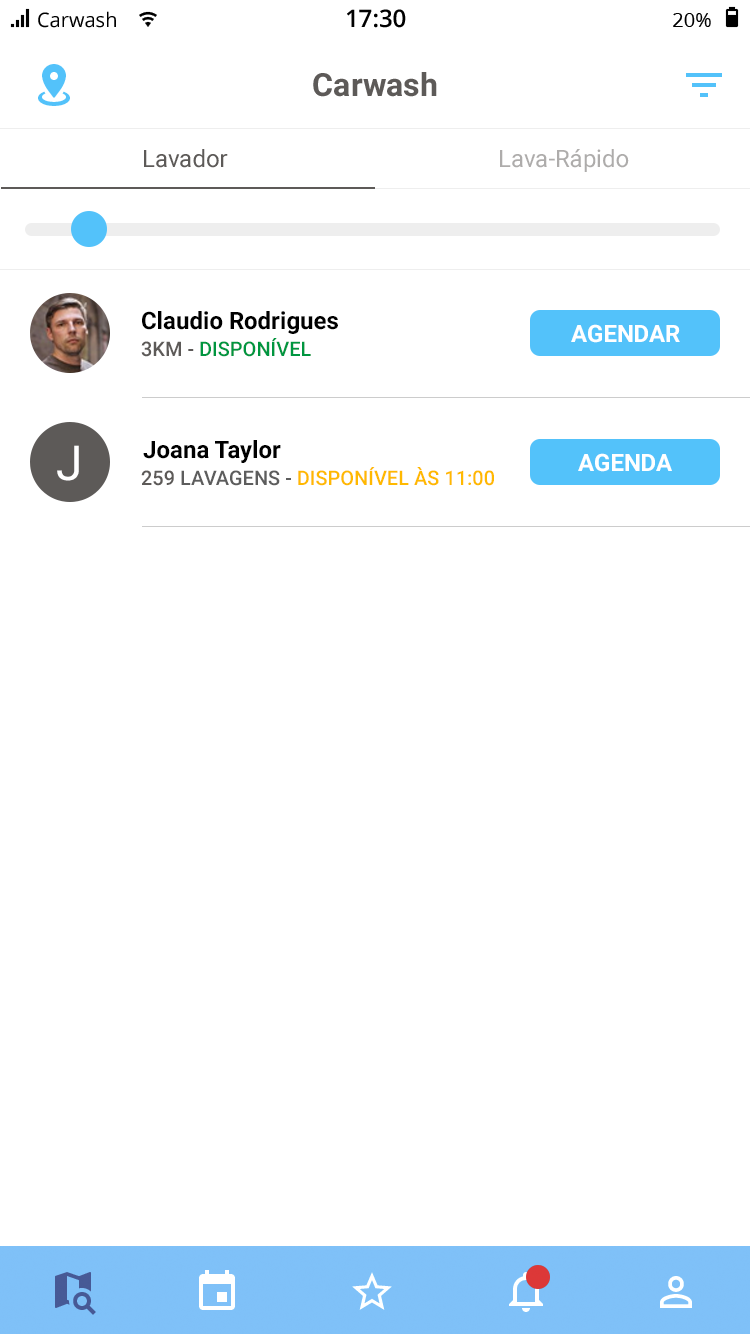
<style>
.page{position:relative;width:750px;height:1334px;background:#ffffff}
.page>*{position:absolute;margin:0}
.t1{font:24px "Roboto-Bold";color:#000000}
.t2{font:24px "Roboto-Bold";color:#ffffff}
.t3{font:20px "Roboto-Medium";color:#009640;text-transform:uppercase}
.t4{font:20px "Roboto-Medium";color:#5d5a58;text-transform:uppercase}
.t5{font:48px "Roboto-Regular";color:#ffffff}
.t6{font:20px "Roboto-Medium";color:#ffb900;text-transform:uppercase}
.t7{font:20px "Roboto-Medium";color:#5d5d5d;text-transform:uppercase}
</style>
<div class="page">
<p class="t1" style="left:142px;top:311px;width:196px;height:23px">Claudio Rodrigues</p>
<p class="t2" style="left:571px;top:324px;width:109px;height:19px">AGENDAR</p>
<p class="t3" style="left:141px;top:338px;width:170px;height:19px"><span class="t4">3km - </span>Disponível</p>
<p class="t5" style="left:57px;top:445px;width:22px;height:36px">J</p>
<p class="t1" style="left:143px;top:440px;width:138px;height:23px">Joana Taylor</p>
<p class="t2" style="left:578px;top:453px;width:94px;height:19px">AGENDA</p>
<p class="t6" style="left:141px;top:467px;width:353px;height:19px"><span class="t4">259 </span><span class="t7">Lavagens - </span>Disponível às 11:00</p>
</div>
